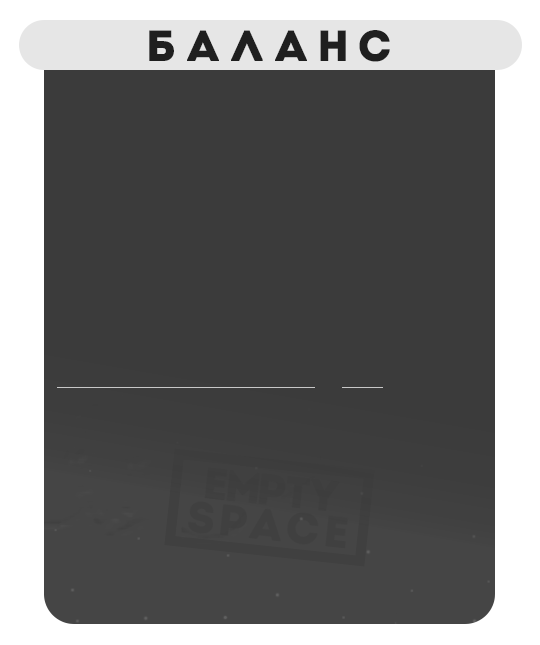
<style>
.page{position:relative;width:540px;height:645px;background:#3b3b3b}
.page>*{position:absolute;margin:0}
.t1{font:43.4px "IntroFriday";letter-spacing:0.28em;color:#1f1f1f}
</style>
<div class="page">
<p class="t1" style="left:149px;top:30px;width:241px;height:32px">БАЛАНС</p>
</div>
